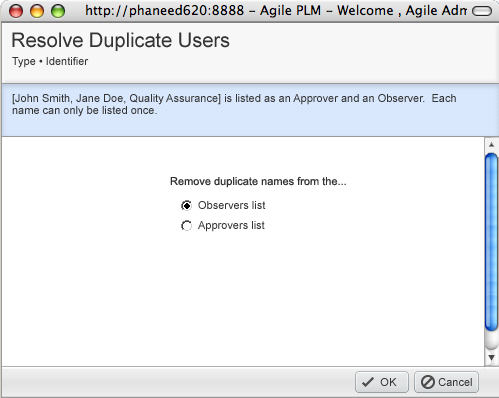
<style>
.page{position:relative;width:499px;height:398px;background:#ffffff}
.page>*{position:absolute;margin:0}
.t1{font:20px "ArialMT";color:#333333}
.t2{font:11px "ArialMT";color:#333333}
.t3{font:11px/12px "ArialMT";color:#333333}
</style>
<div class="page">
<p class="t1" style="left:12px;top:32px;width:218px;height:19px">Resolve Duplicate Users</p>
<p class="t2" style="left:12px;top:57px;width:77px;height:11px">Type • Identifier</p>
<p class="t3" style="left:12px;top:94px;width:444px;height:23px">[John Smith, Jane Doe, Quality Assurance] is listed as an Approver and an Observer.  Each <br>name can only be listed once.</p>
<p class="t2" style="left:170px;top:176px;width:176px;height:12px">Remove duplicate names from the...</p>
<p class="t2" style="left:198px;top:201px;width:68px;height:8px">Observers list</p>
<p class="t2" style="left:198px;top:221px;width:67px;height:11px">Approvers list</p>
<p class="t2" style="left:380px;top:378px;width:17px;height:8px">OK</p>
<p class="t2" style="left:438px;top:378px;width:34px;height:8px">Cancel</p>
</div>
